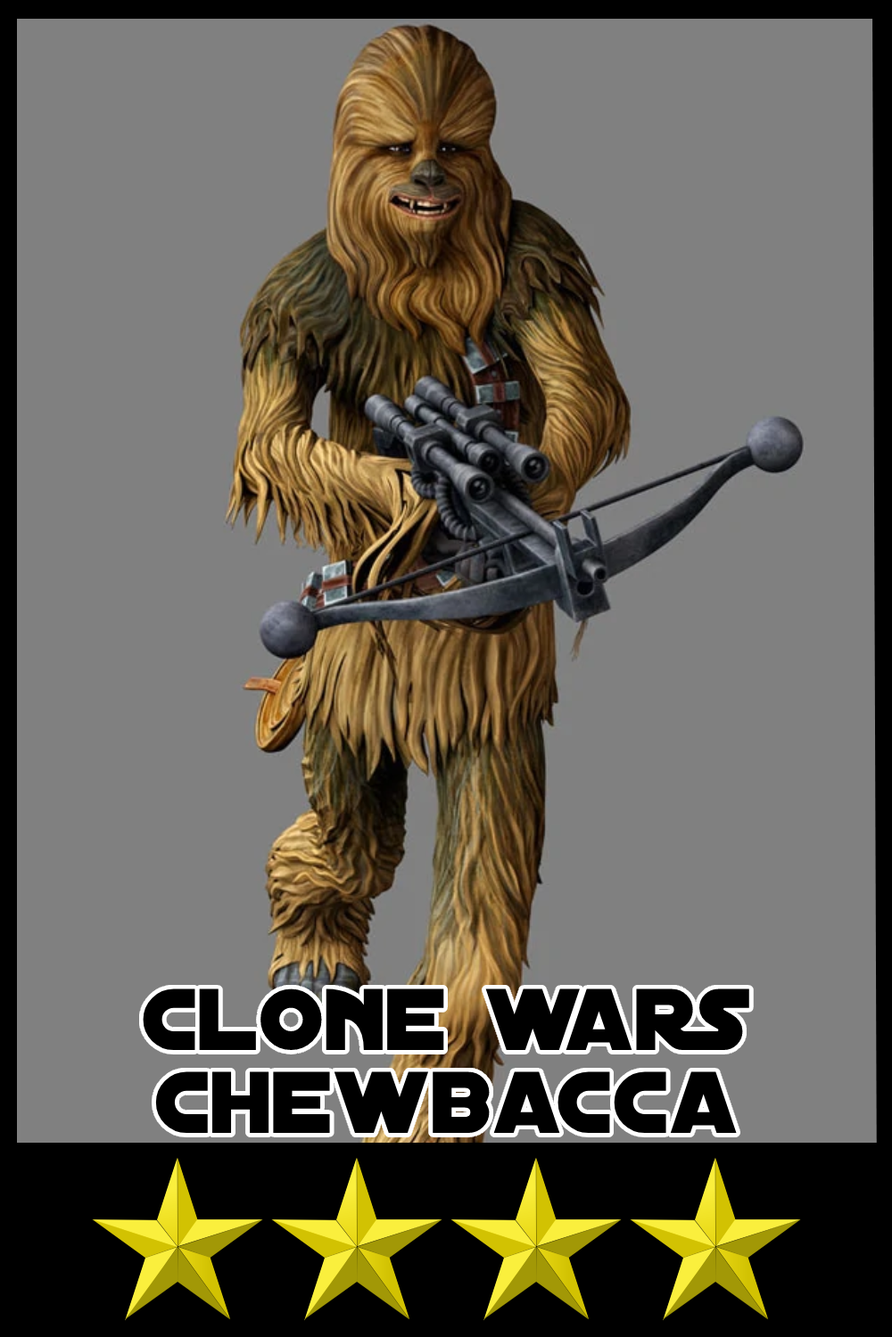
<style>
.page{position:relative;width:892px;height:1337px;background:#808080}
.page>*{position:absolute;margin:0}
.t1{font:93.8px/83px "DistantGalaxy";color:#000000}
</style>
<div class="page">
<p class="t1" style="left:143px;top:989px;width:606px;height:144px;text-align:center">clone wars<br>chewbacca</p>
</div>
